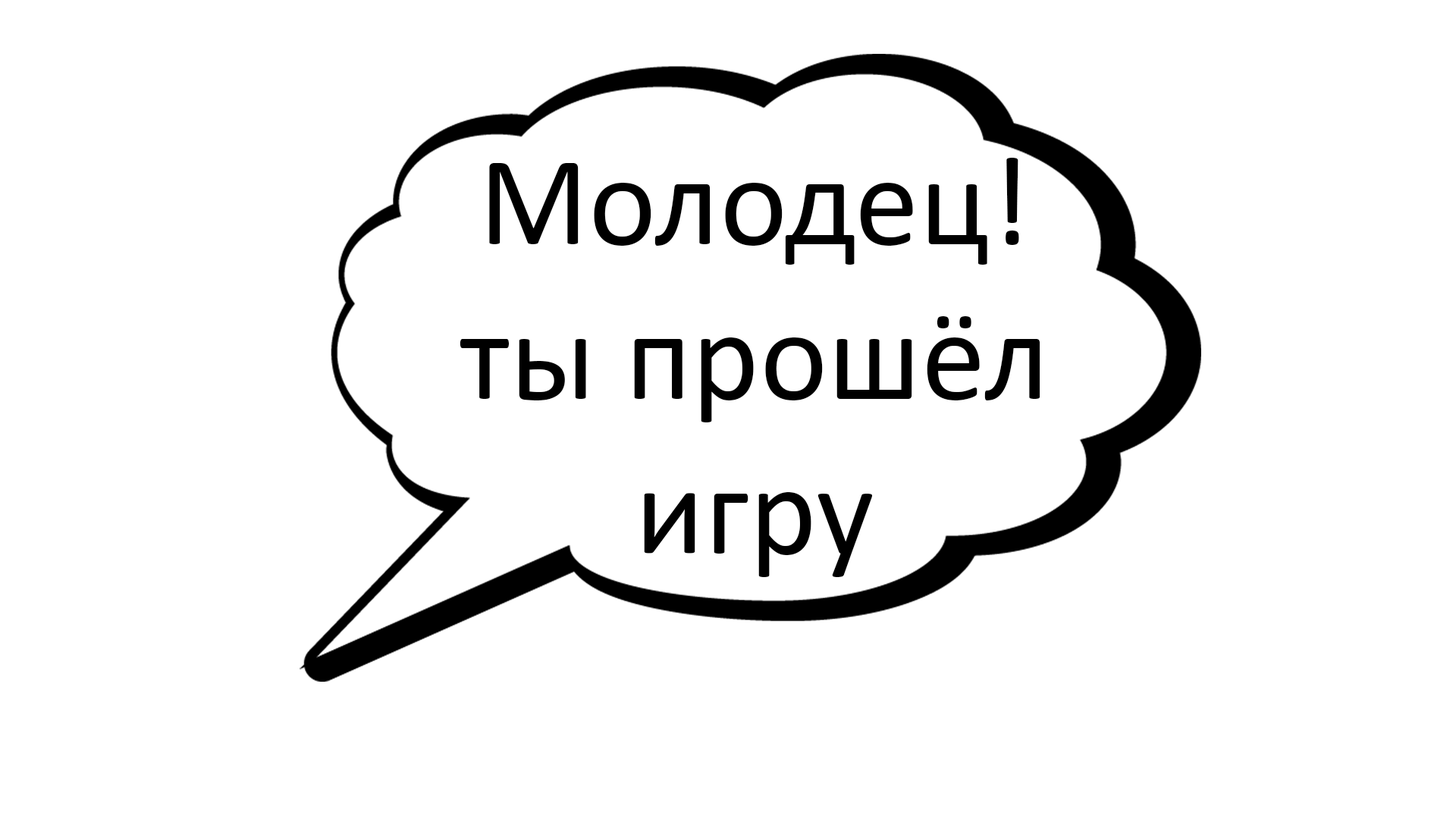
<style>
.page{position:relative;width:1456px;height:819px;background:#ffffff}
.page>*{position:absolute;margin:0}
.t1{font:128.9px "Calibri";color:#000000}
</style>
<div class="page">
<p class="t1" style="left:460px;top:158px;width:580px;height:419px;text-align:center">Молодец!<br>ты прошёл<br>игру</p>
</div>
